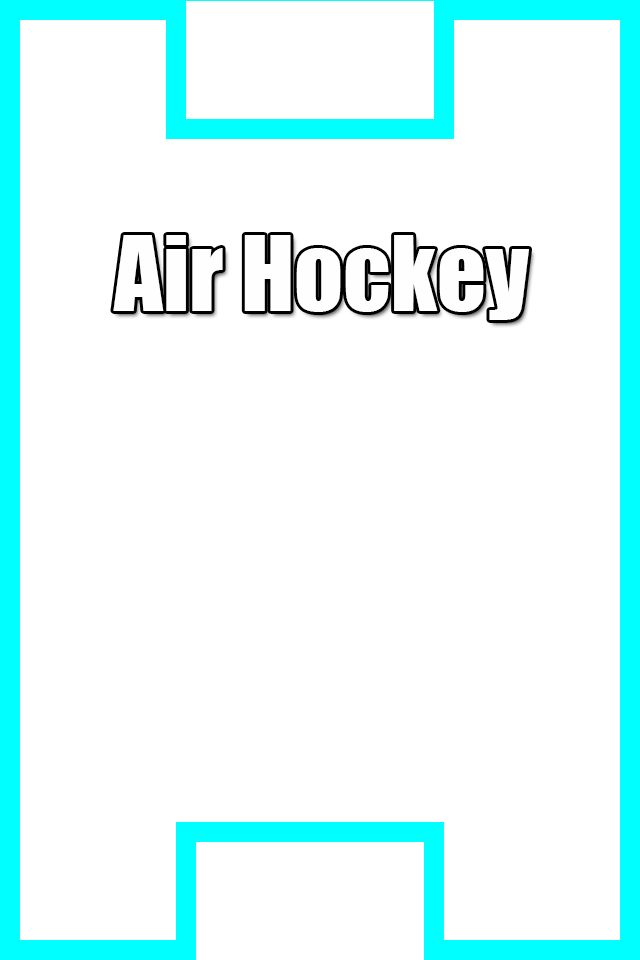
<style>
.page{position:relative;width:640px;height:960px;background:#ffffff}
.page>*{position:absolute;margin:0}
.t1{font:96px "Impact";color:#fffefe}
</style>
<div class="page">
<p class="t1" style="left:113px;top:235px;width:416px;height:85px">Air Hockey</p>
</div>
